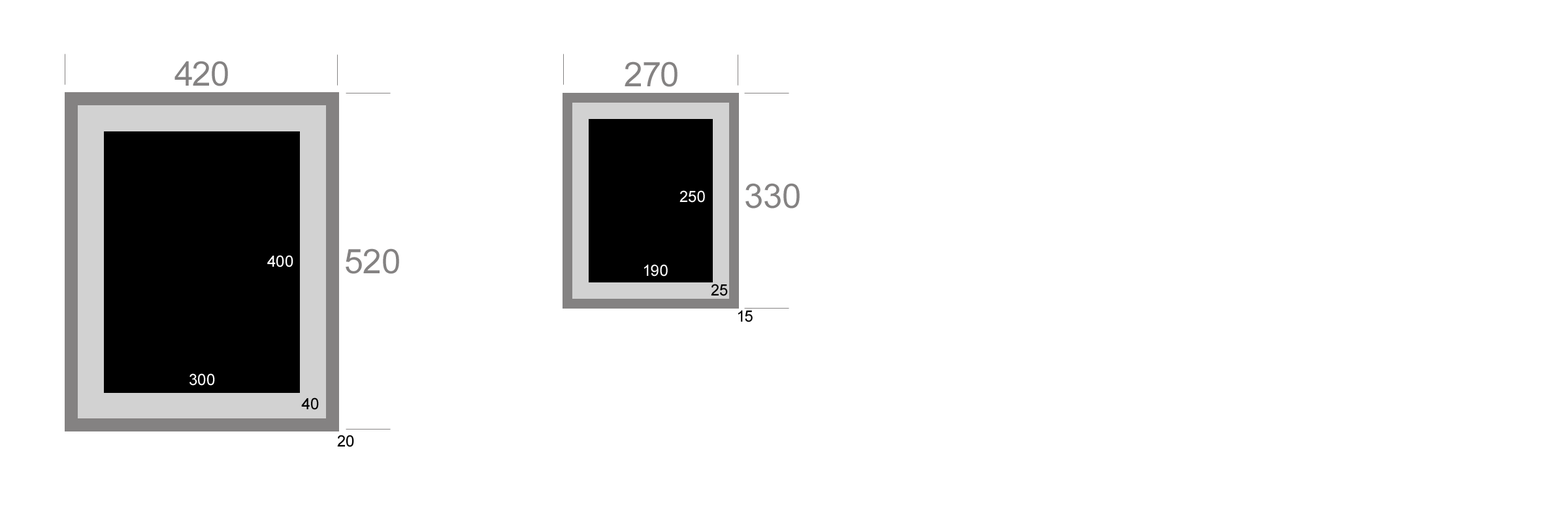
<style>
.page{position:relative;width:1568px;height:523px;background:#ffffff}
.page>*{position:absolute;margin:0}
.t1{font:34px "ArialMT";color:#848282}
.t2{font:15.7px "ArialMT";color:#ffffff}
.t3{font:15.7px "ArialMT";color:#000000}
</style>
<div class="page">
<p class="t1" style="left:174px;top:61px;width:54px;height:25px">420</p>
<p class="t1" style="left:625px;top:61px;width:53px;height:26px">270</p>
<p class="t1" style="left:745px;top:183px;width:55px;height:25px">330</p>
<p class="t2" style="left:679px;top:190px;width:26px;height:13px">250</p>
<p class="t2" style="left:267px;top:255px;width:26px;height:12px">400</p>
<p class="t1" style="left:346px;top:248px;width:53px;height:26px">520</p>
<p class="t2" style="left:644px;top:264px;width:24px;height:12px">190</p>
<p class="t3" style="left:711px;top:284px;width:17px;height:12px">25</p>
<p class="t3" style="left:738px;top:310px;width:15px;height:12px">15</p>
<p class="t2" style="left:189px;top:373px;width:26px;height:12px">300</p>
<p class="t3" style="left:301px;top:397px;width:18px;height:13px">40</p>
<p class="t3" style="left:337px;top:434px;width:17px;height:13px">20</p>
</div>
